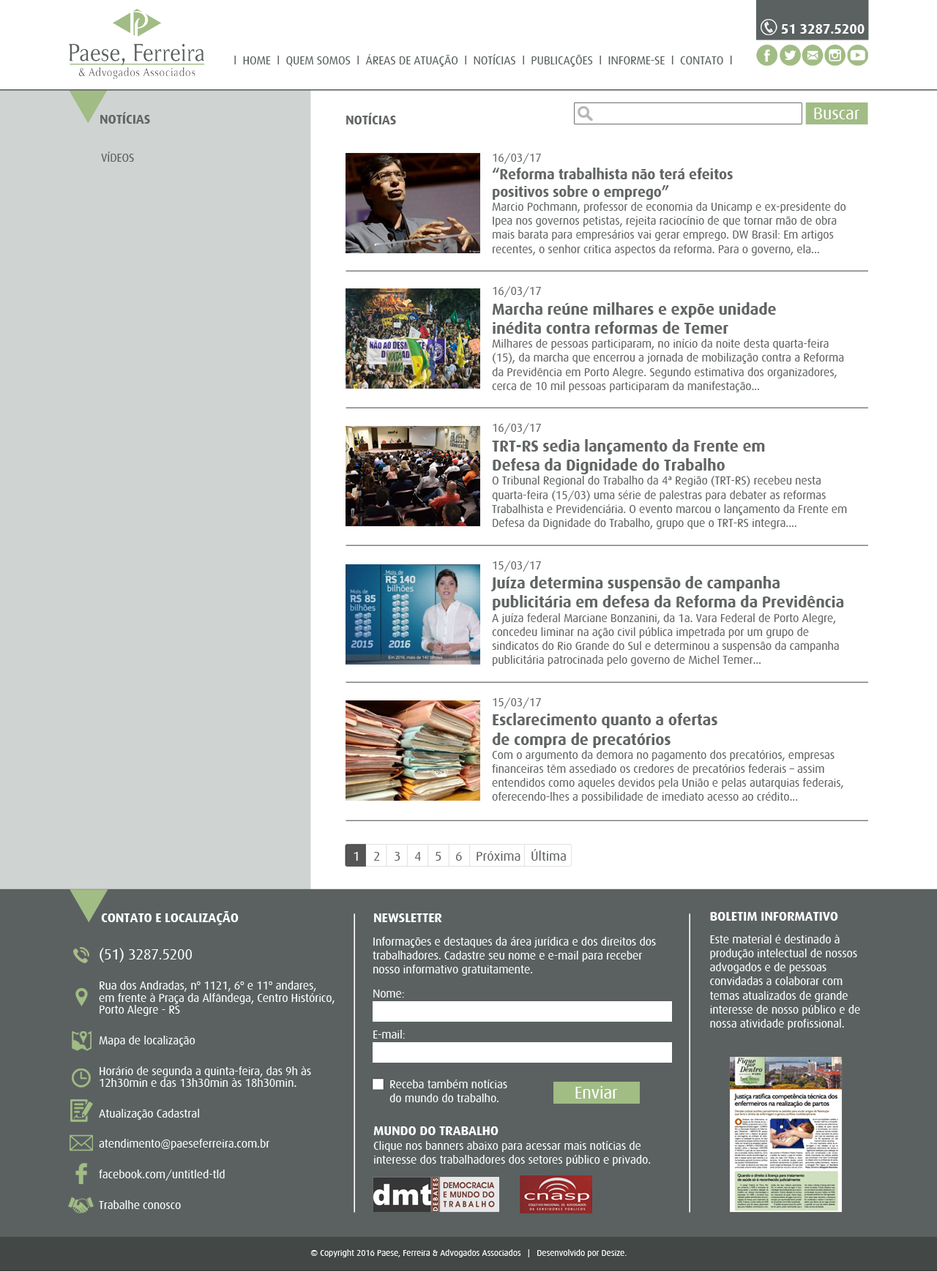
<style>
.page{position:relative;width:937px;height:1272px;background:#ffffff}
.page>*{position:absolute;margin:0}
.t1{font:13.8px "Dax-Bold";letter-spacing:-0.01em;color:#ffffff}
.t2{font:11.7px "Dax-Regular";letter-spacing:-0.01em;color:#5b6161}
.t3{font:10.8px "ArialMT";letter-spacing:-0.01em;color:#000000}
.t4{font:13.2px "Dax-Bold";letter-spacing:-0.01em;color:#626665}
.t5{font:17.4px "Dax-Regular";letter-spacing:-0.01em;color:#ffffff}
.t6{font:11.7px "Dax-Regular";letter-spacing:-0.01em;color:#626665}
.t7{font:14.6px "Dax-Bold";letter-spacing:-0.01em;color:#626665}
.t8{font:16.1px "Dax-Bold";letter-spacing:-0.01em;color:#626665}
.t9{font:13.2px "Dax-Bold";letter-spacing:-0.01em;color:#ffffff}
.t10{font:11.7px "Dax-Regular";letter-spacing:-0.01em;color:#ffffff}
.t11{font:11.7px/12.2px "Dax-Regular";letter-spacing:-0.01em;color:#ffffff}
.t12{font:14.6px/12.2px "Dax-Regular";letter-spacing:-0.01em;color:#ffffff}
.t13{font:8.8px "Dax-Regular";letter-spacing:-0.01em;color:#ffffff}
</style>
<div class="page">
<p class="t1" style="left:781px;top:24px;width:84px;height:10px">51 3287.5200</p>
<p class="t2" style="left:234px;top:54px;width:498px;height:13px"><span class="t3"><br></span>l  HOME  l  QUEM SOMOS  l  ÁREAS DE ATUAÇÃO  l  NOTÍCIAS  l  PUBLICAÇÕES  l  INFORME-SE  l  CONTATO  l</p>
<p class="t4" style="left:100px;top:112px;width:50px;height:12px">NOTÍCIAS</p>
<p class="t4" style="left:346px;top:113px;width:50px;height:11px">NOTÍCIAS</p>
<p class="t5" style="left:814px;top:108px;width:46px;height:11px">Buscar</p>
<p class="t2" style="left:101px;top:152px;width:33px;height:10px">VÍDEOS</p>
<p class="t6" style="left:491px;top:153px;width:356px;height:650px"><span class="t4"><br><br></span>16/03/17<br><span class="t7">“Reforma trabalhista não terá efeitos <br>positivos sobre o emprego”<br></span>Marcio Pochmann, professor de economia da Unicamp e ex-presidente do Ipea nos governos petistas, rejeita raciocínio de que tornar mão de obra mais barata para empresários vai gerar emprego. DW Brasil: Em artigos recentes, o senhor critica aspectos da reforma. Para o governo, ela...<br><br><br>16/03/17<br><span class="t8">Marcha reúne milhares e expõe unidade <br>inédita contra reformas de Temer<br></span>Milhares de pessoas participaram, no início da noite desta quarta-feira (15), da marcha que encerrou a jornada de mobilização contra a Reforma da Previdência em Porto Alegre. Segundo estimativa dos organizadores, cerca de 10 mil pessoas participaram da manifestação...<br><br><br>16/03/17<br><span class="t8">TRT-RS sedia lançamento da Frente em <br>Defesa da Dignidade do Trabalho<br></span>O Tribunal Regional do Trabalho da 4ª Região (TRT-RS) recebeu nesta quarta-feira (15/03) uma série de palestras para debater as reformas Trabalhista e Previdenciária. O evento marcou o lançamento da Frente em Defesa da Dignidade do Trabalho, grupo que o TRT-RS integra....<br><br><br>15/03/17<br><span class="t8">Juíza determina suspensão de campanha publicitária em defesa da Reforma da Previdência<br></span>A juíza federal Marciane Bonzanini, da 1a. Vara Federal de Porto Alegre, concedeu liminar na ação civil pública impetrada por um grupo de sindicatos do Rio Grande do Sul e determinou a suspensão da campanha publicitária patrocinada pelo governo de Michel Temer...<br><br><br>15/03/17<br><span class="t8">Esclarecimento quanto a ofertas <br>de compra de precatórios<br></span>Com o argumento da demora no pagamento dos precatórios, empresas financeiras têm assediado os credores de precatórios federais – assim entendidos como aqueles devidos pela União e pelas autarquias federais, oferecendo-lhes a possibilidade de imediato acesso ao crédito...</p>
<p class="t9" style="left:101px;top:911px;width:138px;height:14px">CONTATO E LOCALIZAÇÃO</p>
<p class="t9" style="left:374px;top:914px;width:68px;height:8px">NEWSLETTER</p>
<p class="t10" style="left:710px;top:912px;width:150px;height:118px"><span class="t9">BOLETIM INFORMATIVO<br><br></span>Este material é destinado à produção intelectual de nossos advogados e de pessoas convidadas a colaborar com temas atualizados de grande interesse de nosso público e de nossa atividade profissional.</p>
<p class="t10" style="left:373px;top:937px;width:283px;height:39px">Informações e destaques da área jurídica e dos direitos dos trabalhadores. Cadastre seu nome e e-mail para receber nosso informativo gratuitamente.</p>
<p class="t11" style="left:99px;top:948px;width:236px;height:261px"><span class="t12">(51) 3287.5200<br><br></span>Rua dos Andradas, nº 1121, 6º e 11º andares, <br>em frente à Praça da Alfândega, Centro Histórico, Porto Alegre - RS<br><br>Mapa de localização<br><br>Horário de segunda a quinta-feira, das 9h às 12h30min e das 13h30min às 18h30min.<br><br>Atualização Cadastral<br><br>atendimento@paeseferreira.com.br<br><br>facebook.com/untitled-tld<br><br>Trabalhe conosco</p>
<p class="t10" style="left:373px;top:990px;width:31px;height:8px">Nome:</p>
<p class="t10" style="left:373px;top:1030px;width:32px;height:9px">E-mail:</p>
<p class="t10" style="left:389px;top:1080px;width:118px;height:23px">Receba também notícias<br>do mundo do trabalho.</p>
<p class="t5" style="left:575px;top:1086px;width:43px;height:13px">Enviar</p>
<p class="t10" style="left:373px;top:1127px;width:278px;height:39px"><span class="t9">MUNDO DO TRABALHO <br></span>Clique nos banners abaixo para acessar mais notícias de <br>interesse dos trabalhadores dos setores público e privado.</p>
<p class="t13" style="left:310px;top:1250px;width:317px;height:8px">© Copyright 2016 Paese, Ferreira &amp; Advogados Associados   |   Desenvolvido por Desize.</p>
</div>
